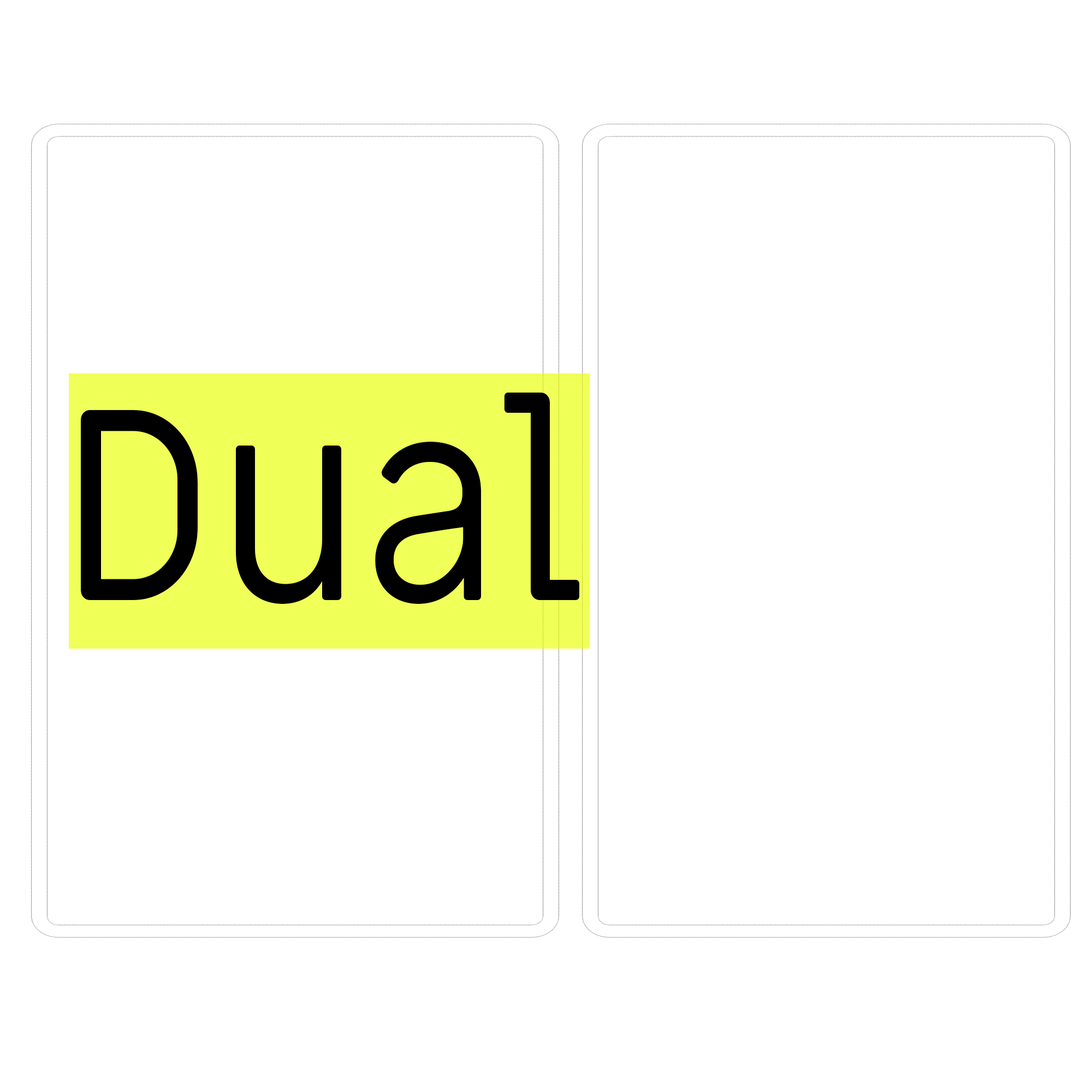
<style>
.page{position:relative;width:1092px;height:1092px;background:#ffffff}
.page>*{position:absolute;margin:0}
.t1{font:273px "MiriamLibre-Regular";color:#000000;scale:0.9 1}
.t2{font:273px "MiriamLibre-Regular";color:#ffffff;scale:0.9 1}
</style>
<div class="page">
<p class="t1" style="left:81px;top:393px;width:878px;height:211px">Dual<span class="t2">cus</span></p>
</div>
